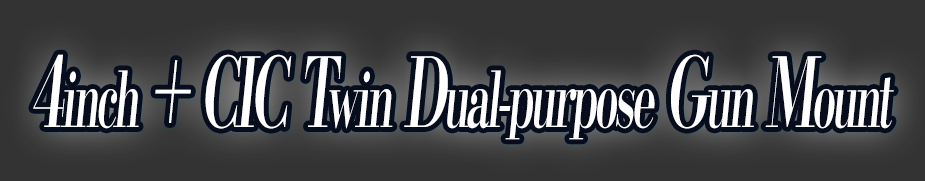
<style>
.page{position:relative;width:925px;height:181px;background:#333333}
.page>*{position:absolute;margin:0}
.t1{font:76.8px "KochoStd-Heavy";letter-spacing:-0.08em;color:#ffffff;font-style:italic;scale:0.56 1}
.t2{font:96px "KochoStd-Heavy";letter-spacing:-0.08em;color:#ffffff;font-style:italic;scale:0.56 1}
</style>
<div class="page">
<p class="t1" style="left:33px;top:54px;width:861px;height:86px"><span class="t2">4</span>inch<span class="t2"> + CIC T</span>win<span class="t2"> D</span>ual-purpose<span class="t2"> G</span>un<span class="t2"> M</span>ount</p>
</div>
